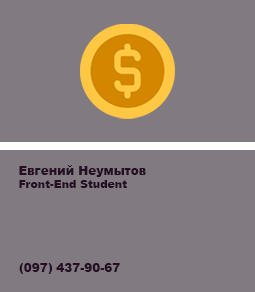
<style>
.page{position:relative;width:255px;height:292px;background:#817a81}
.page>*{position:absolute;margin:0}
.t1{font:11px "Arial-Black";color:#260e25}
.t2{font:12px "Arial-Black";color:#260e25}
</style>
<div class="page">
<p class="t1" style="left:19px;top:165px;width:127px;height:23px"><span class="t2">Евгений Неумытов<br></span>Front-End Student</p>
<p class="t2" style="left:19px;top:263px;width:101px;height:11px">(097) 437-90-67</p>
</div>
